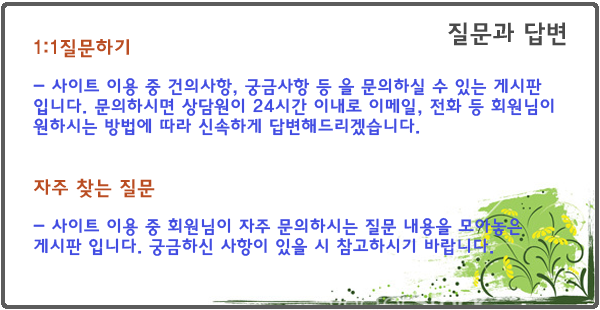
<style>
.page{position:relative;width:600px;height:310px;background:#ffffff}
.page>*{position:absolute;margin:0}
.t1{font:25px "HaanYGodic24";color:#494949}
.t2{font:18px/20px "HaanYGodic24";color:#424de2}
.t3{font:20px/20px "HaanYGodic24";color:#ba4d22}
</style>
<div class="page">
<p class="t1" style="left:448px;top:22px;width:118px;height:24px">질문과 답변</p>
<p class="t2" style="left:33px;top:39px;width:521px;height:217px"><span class="t3">1:1질문하기 <br></span><br>- 사이트 이용 중 건의사항, 궁금사항 등 을 문의하실 수 있는 게시판 입니다. 문의하시면 상담원이 24시간 이내로 이메일, 전화 등 회원님이 원하시는 방법에 따라 신속하게 답변해드리겠습니다.<br> <br><br><span class="t3">자주 찾는 질문<br></span><br>- 사이트 이용 중 회원님이 자주 문의하시는 질문 내용을 모아놓은 게시판 입니다. 궁금하신 사항이 있을 시 참고하시기 바랍니다.</p>
</div>
